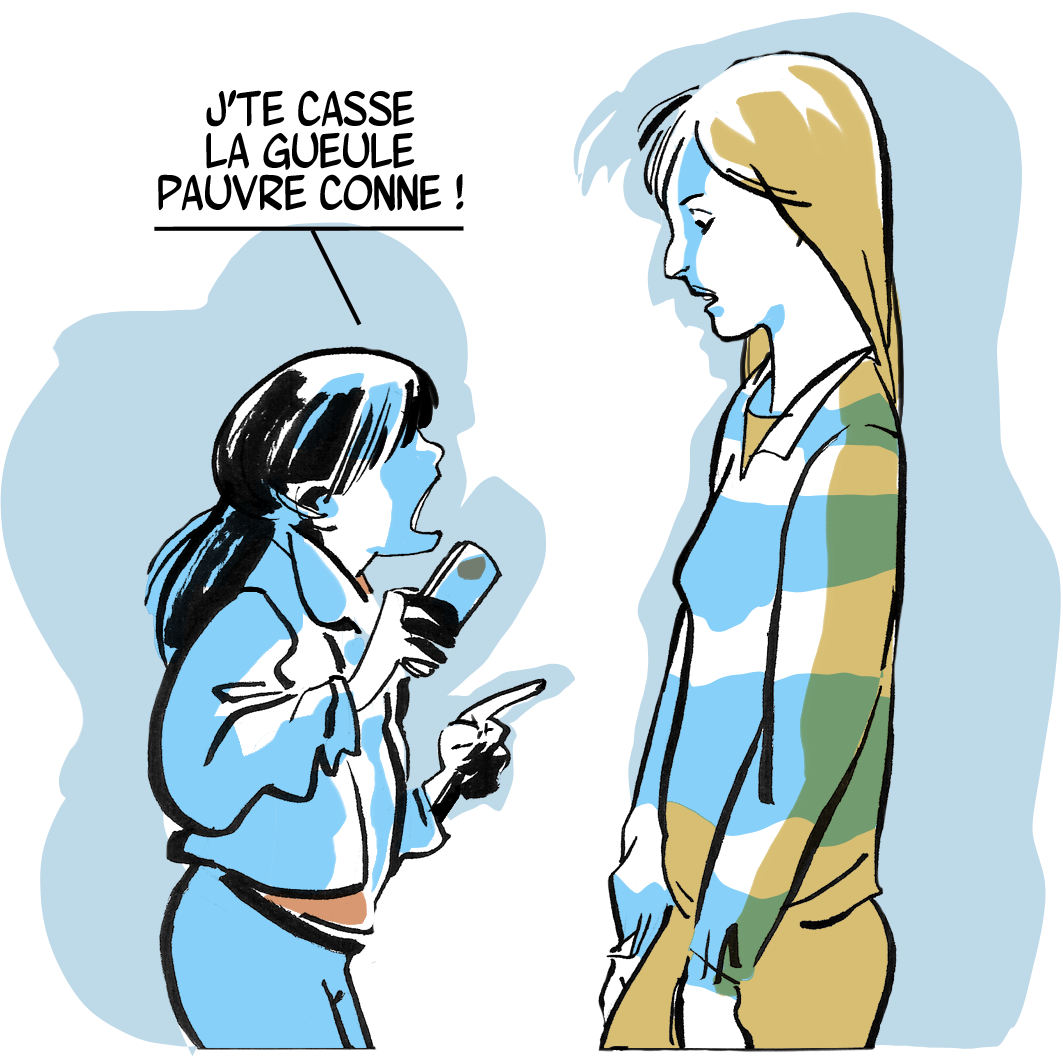
<style>
.page{position:relative;width:1063px;height:1063px;background:#ffffff}
.page>*{position:absolute;margin:0}
.t1{font:50px/41.7px "WurmicsBravo";color:#000000}
</style>
<div class="page">
<p class="t1" style="left:158px;top:90px;width:306px;height:121px;text-align:center">J’te casse<br> la gueule <br>pauvre conne !</p>
</div>
